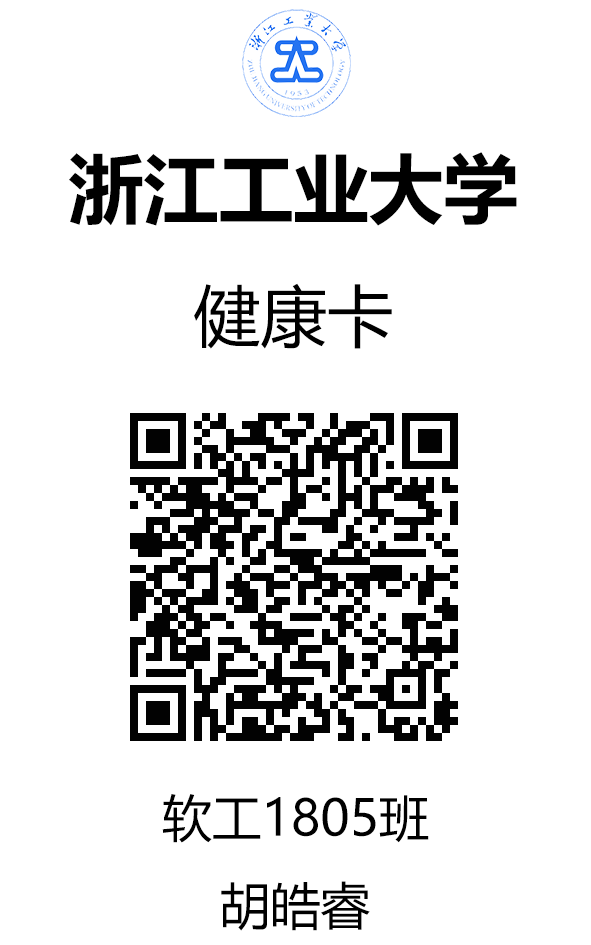
<style>
.page{position:relative;width:591px;height:945px;background:#ffffff}
.page>*{position:absolute;margin:0}
.t1{font:75px "MicrosoftYaHei-Bold";color:#000000}
.t2{font:66.7px "MicrosoftYaHei";color:#000000}
.t3{font:50px "MicrosoftYaHei";color:#000000}
</style>
<div class="page">
<p class="t1" style="left:69px;top:152px;width:448px;height:197px;text-align:center">浙江工业大学<br><span class="t2">健康卡</span></p>
<p class="t3" style="left:162px;top:794px;width:267px;height:137px;text-align:center">软工1805班<br>胡皓睿</p>
</div>
